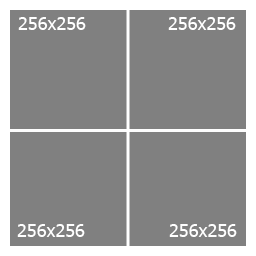
<style>
.page{position:relative;width:256px;height:256px;background:#808080}
.page>*{position:absolute;margin:0}
.t1{font:18px "Tahoma";color:#ffffff}
</style>
<div class="page">
<p class="t1" style="left:18px;top:17px;width:68px;height:13px">256x256</p>
<p class="t1" style="left:168px;top:17px;width:68px;height:13px">256x256</p>
<p class="t1" style="left:17px;top:224px;width:68px;height:13px">256x256</p>
<p class="t1" style="left:169px;top:224px;width:68px;height:13px">256x256</p>
</div>
